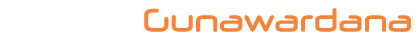
<style>
.page{position:relative;width:420px;height:40px;background:#ffffff}
.page>*{position:absolute;margin:0}
.t1{font:31.6px "NeuropolXRg-Regular";letter-spacing:-0.06em;color:#f68338;font-weight:bold;scale:0.9 1}
.t2{font:31.6px "NeuropolXRg-Regular";letter-spacing:-0.06em;color:#ffffff;font-weight:bold;scale:0.9 1}
</style>
<div class="page">
<p class="t1" style="left:13px;top:8px;width:398px;height:24px"><span class="t2">Lahiru </span>Gunawardana</p>
</div>
